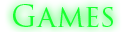
<style>
.page{position:relative;width:124px;height:32px}
.page>*{position:absolute;margin:0}
.t1{font:30px "TrajanPro-Regular";color:#17ff30}
</style>
<div class="page">
<p class="t1" style="left:13px;top:4px;width:100px;height:23px">Games</p>
</div>
